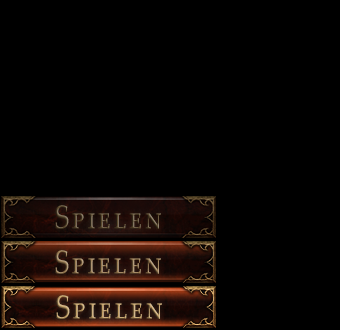
<style>
.page{position:relative;width:340px;height:330px;background:#000000}
.page>*{position:absolute;margin:0}
.t1{font:32.4px "PalatinoLinotype-Roman";letter-spacing:0.1em;font-variant:small-caps;scale:0.83 1}
</style>
<div class="page">
<p class="t1" style="left:55px;top:205px;width:106px;height:24px">Spielen</p>
<p class="t1" style="left:55px;top:250px;width:106px;height:24px">Spielen</p>
<p class="t1" style="left:56px;top:295px;width:106px;height:24px">Spielen</p>
</div>
